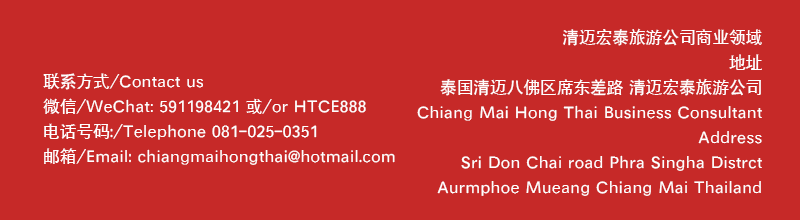
<style>
.page{position:relative;width:800px;height:220px;background:#c62928}
.page>*{position:absolute;margin:0}
.t1{font:16.7px/25px "SIL-Hei-Med-Jian";color:#ffffff}
</style>
<div class="page">
<p class="t1" style="left:417px;top:28px;width:345px;height:168px;text-align:right">清迈宏泰旅游公司商业领域<br>地址<br>泰国清迈八佛区席东差路 清迈宏泰旅游公司<br>Chiang Mai Hong Thai Business Consultant<br>Address<br>Sri Don Chai road Phra Singha Distrct <br>Aurmphoe Mueang Chiang Mai Thailand</p>
<p class="t1" style="left:43px;top:73px;width:352px;height:92px">联系方式/Contact us<br>微信/WeChat: 591198421 或/or HTCE888<br>电话号码:/Telephone 081-025-0351<br>邮箱/Email: chiangmaihongthai@hotmail.com</p>
</div>
